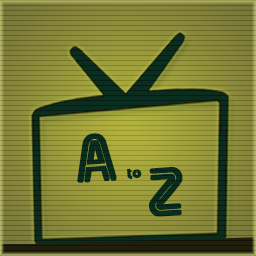
<style>
.page{position:relative;width:256px;height:256px}
.page>*{position:absolute;margin:0}
.t1{font:17.3px/39px "Skinny";color:#092e20;font-weight:bold}
.t2{font:66.4px/39px "Skinny";color:#092e20;font-weight:bold}
</style>
<div class="page">
<p class="t1" style="left:77px;top:133px;width:106px;height:84px;text-align:center;rotate:-4deg"><span class="t2">A</span> to  <br><span class="t2">  Z</span></p>
</div>
